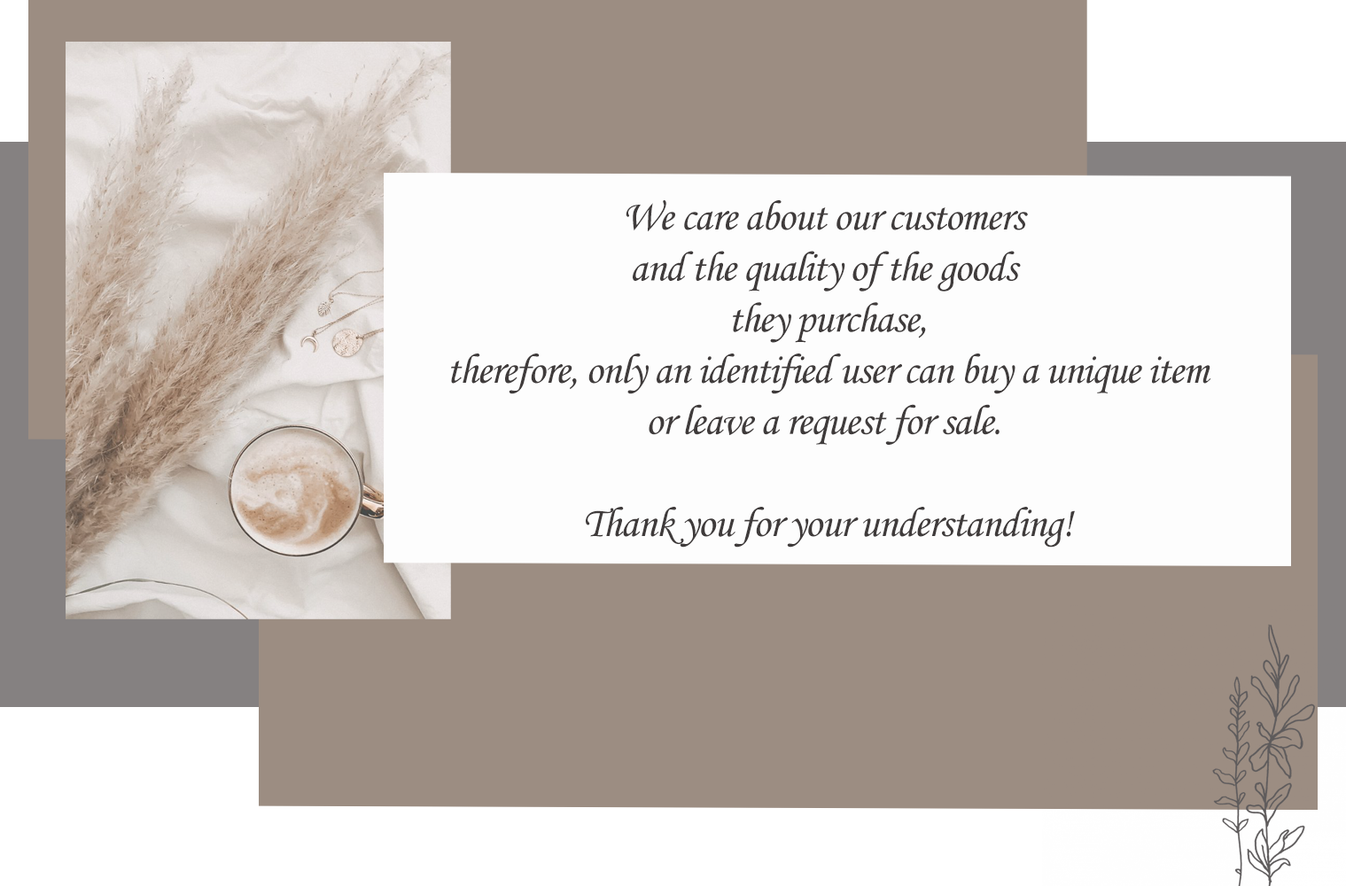
<style>
.page{position:relative;width:1346px;height:886px;background:#9c8d82}
.page>*{position:absolute;margin:0}
.t1{font:42.6px "MonotypeCorsiva";letter-spacing:-0.025em;color:#3f3b3b}
</style>
<div class="page">
<p class="t1" style="left:451px;top:200px;width:760px;height:348px;text-align:center">We care about our customers <br>and the quality of the goods <br>they purchase,<br>therefore, only an identified user can buy a unique item<br>or leave a request for sale. <br><br>Thank you for your understanding!</p>
</div>
